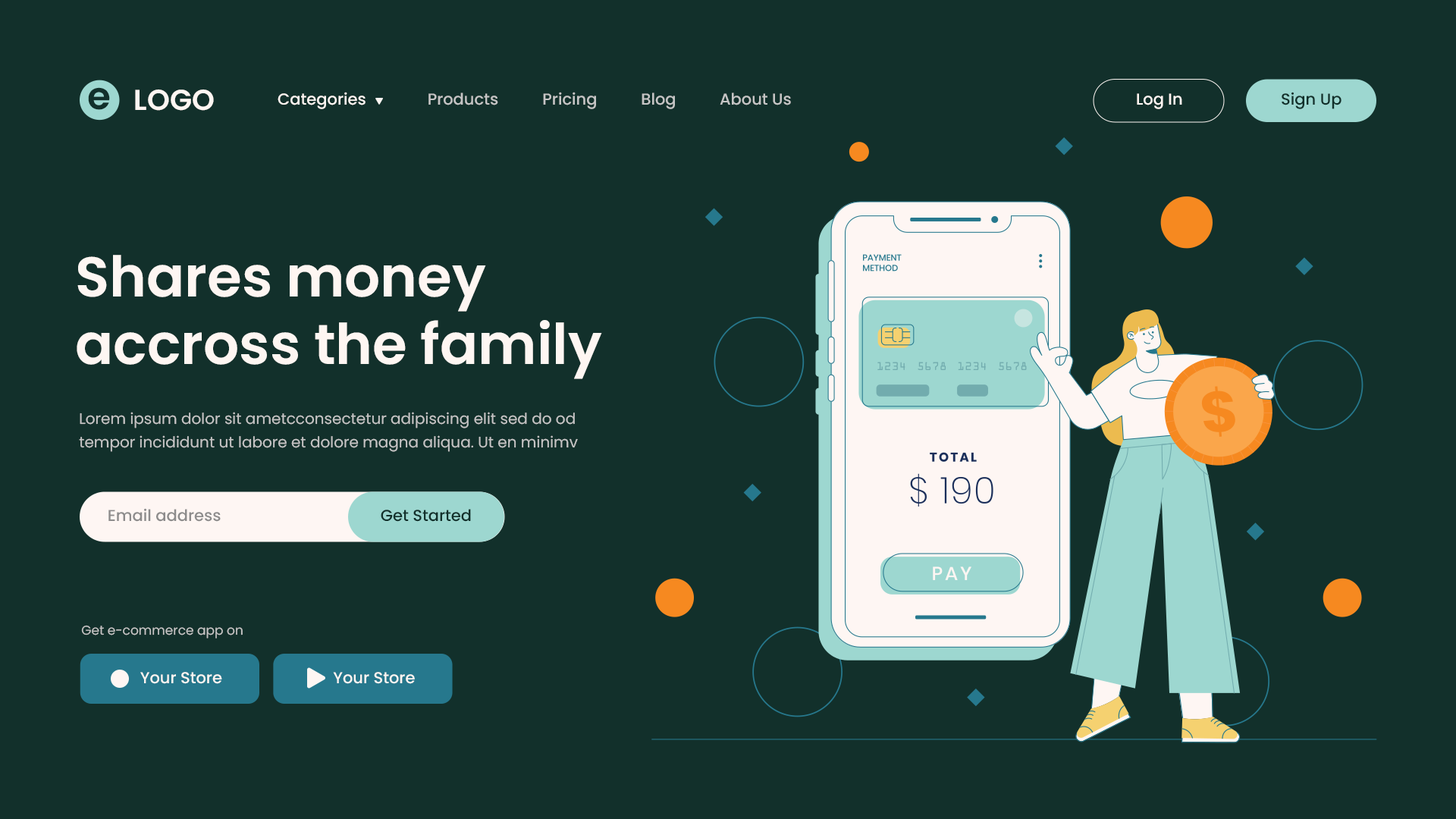
<style>
.page{position:relative;width:1456px;height:819px;background:#12302b}
.page>*{position:absolute;margin:0}
.t1{font:37.9px "Poppins-SemiBold";color:#12302b}
.t2{font:28.8px "Poppins-SemiBold";color:#fef6f3}
.t3{font:15.9px "Poppins-Medium";color:#fef6f3}
.t4{font:15.9px "Poppins-Medium";color:#c6c6c6}
.t5{font:15.9px "Poppins-Medium";color:#12302b}
.t6{font:56.1px "Poppins-SemiBold";color:#fef6f3}
.t7{font:15.2px/23.5px "Poppins-Regular";color:#c6c6c6}
.t8{font:15.9px "Poppins-Medium";color:#8e8d8d}
.t9{font:12.9px "Poppins-Regular";color:#c6c6c6}
</style>
<div class="page">
<p class="t1" style="left:88px;top:87px;width:22px;height:23px">e</p>
<p class="t2" style="left:135px;top:89px;width:79px;height:22px">LOGO</p>
<p class="t3" style="left:278px;top:92px;width:88px;height:17px">Categories</p>
<p class="t4" style="left:428px;top:93px;width:70px;height:12px">Products</p>
<p class="t4" style="left:543px;top:92px;width:53px;height:17px">Pricing</p>
<p class="t4" style="left:642px;top:93px;width:33px;height:16px">Blog</p>
<p class="t4" style="left:720px;top:93px;width:71px;height:12px">About Us</p>
<p class="t3" style="left:1137px;top:93px;width:45px;height:16px">Log In</p>
<p class="t5" style="left:1282px;top:92px;width:59px;height:17px">Sign Up</p>
<p class="t6" style="left:77px;top:255px;width:525px;height:124px">Shares money<br>accross the family</p>
<p class="t7" style="left:79px;top:412px;width:499px;height:40px">Lorem ipsum dolor sit ametcconsectetur adipiscing elit sed do od<br>tempor incididunt ut labore et dolore magna aliqua. Ut en minimv</p>
<p class="t8" style="left:108px;top:508px;width:113px;height:14px">Email address</p>
<p class="t5" style="left:381px;top:509px;width:90px;height:13px">Get Started</p>
<p class="t9" style="left:81px;top:625px;width:162px;height:14px">Get e-commerce app on</p>
<p class="t3" style="left:140px;top:672px;width:82px;height:12px">Your Store</p>
<p class="t3" style="left:333px;top:672px;width:82px;height:12px">Your Store</p>
</div>
